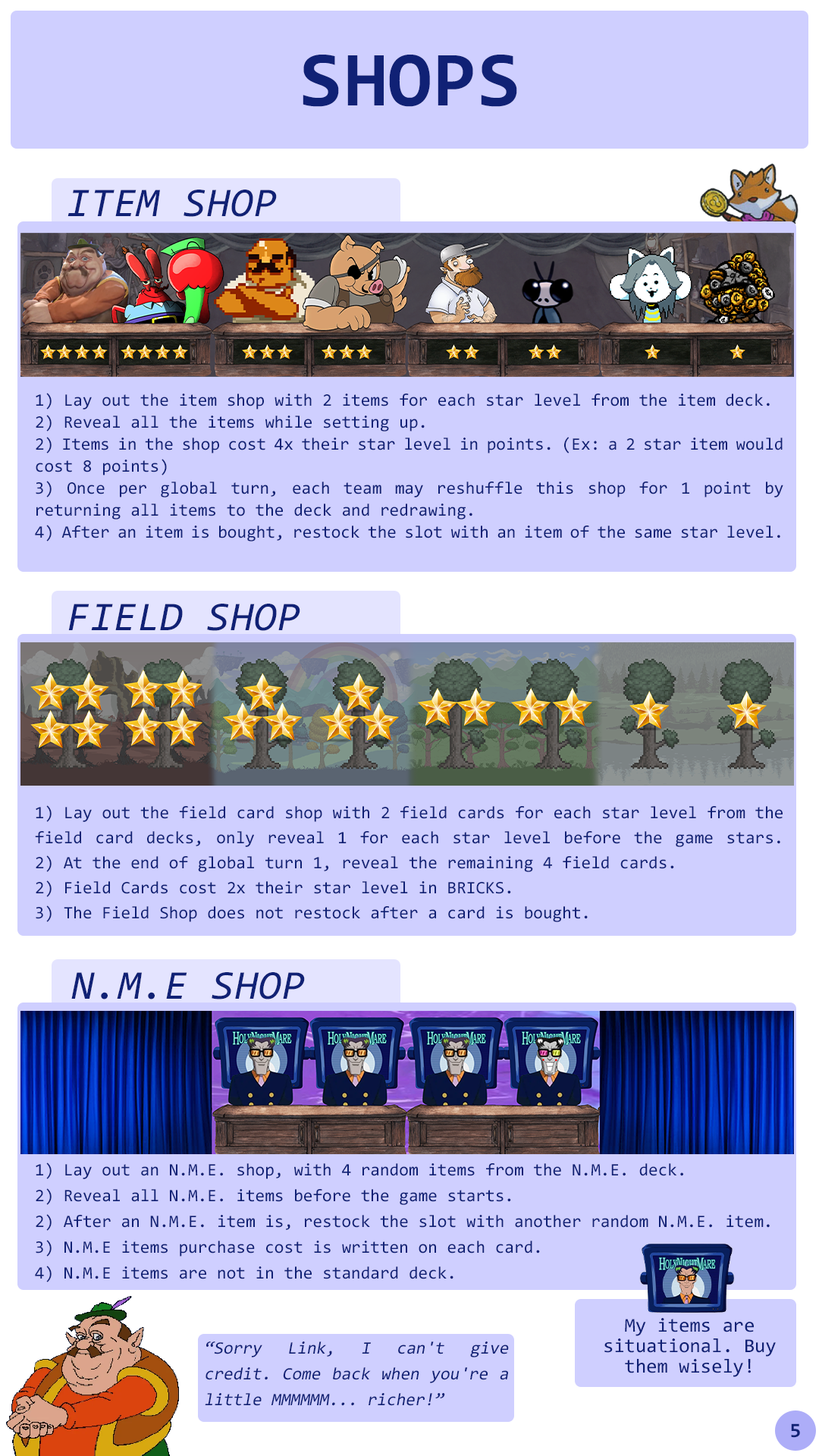
<style>
.page{position:relative;width:819px;height:1456px;background:#cfcfff}
.page>*{position:absolute;margin:0}
.t1{font:78.3px "Consolas-Bold";letter-spacing:0.02em;color:#102175}
.t2{font:41.1px "Consolas-Italic";letter-spacing:0.02em;color:#102175}
.t3{font:17.4px/22px "Consolas";color:#102175}
.t4{font:17.4px/25px "Consolas";color:#102175}
.t5{font:17.4px/25.8px "Consolas";color:#102175}
.t6{font:19.7px/20.5px "Consolas";color:#102175}
.t7{font:17.4px/25.8px "Consolas";color:#102175;font-style:italic}
.t8{font:20.5px "Consolas-Bold";letter-spacing:-0.06em;color:#102175}
</style>
<div class="page">
<p class="t1" style="left:303px;top:55px;width:214px;height:52px">SHOPS</p>
<p class="t2" style="left:67px;top:190px;width:210px;height:27px">ITEM SHOP</p>
<p class="t3" style="left:35px;top:393px;width:748px;height:148px;text-align:justify">1) Lay out the item shop with 2 items for each star level from the item deck.<br>2) Reveal all the items while setting up.<br>2) Items in the shop cost 4x their star level in points. (Ex: a 2 star item would cost 8 points)<br>3) Once per global turn, each team may reshuffle this shop for 1 point by returning all items to the deck and redrawing.<br>4) After an item is bought, restock the slot with an item of the same star level.</p>
<p class="t2" style="left:68px;top:604px;width:232px;height:27px">FIELD SHOP</p>
<p class="t4" style="left:35px;top:805px;width:748px;height:117px;text-align:justify">1) Lay out the field card shop with 2 field cards for each star level from the field card decks, only reveal 1 for each star level before the game stars.<br>2) At the end of global turn 1, reveal the remaining 4 field cards.<br>2) Field Cards cost 2x their star level in BRICKS.<br>3) The Field Shop does not restock after a card is bought.</p>
<p class="t2" style="left:71px;top:972px;width:234px;height:27px">N.M.E SHOP</p>
<p class="t5" style="left:35px;top:1163px;width:735px;height:119px;text-align:justify">1) Lay out an N.M.E. shop, with 4 random items from the N.M.E. deck.<br>2) Reveal all N.M.E. items before the game starts.<br>2) After an N.M.E. item is, restock the slot with another random N.M.E. item.<br>3) N.M.E items purchase cost is written on each card.<br>4) N.M.E items are not in the standard deck.</p>
<p class="t6" style="left:604px;top:1318px;width:172px;height:59px;text-align:center">My items are situational. Buy them wisely!</p>
<p class="t7" style="left:205px;top:1341px;width:304px;height:65px;text-align:justify">“Sorry Link, I can't give credit. Come back when you're a little MMMMMM... richer!”</p>
<p class="t8" style="left:791px;top:1423px;width:9px;height:15px">5</p>
</div>
